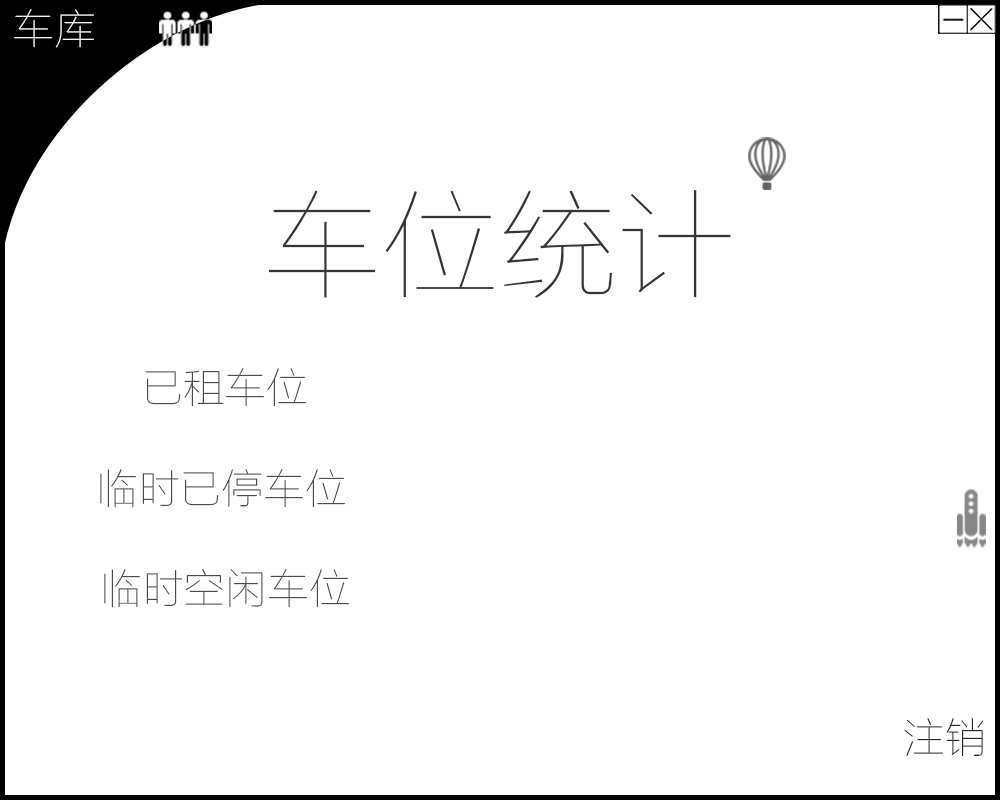
<style>
.page{position:relative;width:1000px;height:800px;background:#ffffff}
.page>*{position:absolute;margin:0}
.t1{font:41.7px "FZLTCXHJW--GB1-0";color:#ffffff}
.t2{font:118.1px "FZLTCXHJW--GB1-0";color:#353535}
.t3{font:41.7px "FZLTCXHJW--GB1-0";color:#353535}
.t4{font:41.7px "FZLTCXHJW--GB1-0"}
</style>
<div class="page">
<p class="t1" style="left:14px;top:9px;width:80px;height:39px">车库</p>
<p class="t2" style="left:269px;top:190px;width:462px;height:108px">车位统计</p>
<p class="t3" style="left:145px;top:368px;width:161px;height:39px">已租车位</p>
<p class="t3" style="left:100px;top:469px;width:245px;height:39px">临时已停车位</p>
<p class="t3" style="left:104px;top:569px;width:245px;height:39px">临时空闲车位</p>
<p class="t4" style="left:904px;top:718px;width:80px;height:39px">注销</p>
</div>
